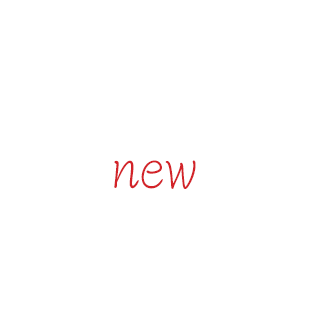
<style>
.page{position:relative;width:320px;height:320px;background:#ffffff}
.page>*{position:absolute;margin:0}
.t1{font:72px "KafuPenjiStd-L";letter-spacing:-0.015em;color:#d32329}
</style>
<div class="page">
<p class="t1" style="left:114px;top:160px;width:82px;height:29px">new</p>
</div>
